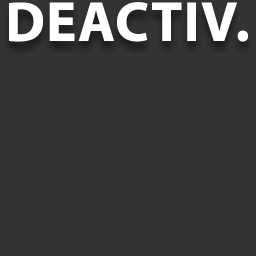
<style>
.page{position:relative;width:256px;height:256px;background:#333333}
.page>*{position:absolute;margin:0}
.t1{font:56.5px "MyriadPro-Bold";color:#ffffff;font-weight:bold}
</style>
<div class="page">
<p class="t1" style="left:9px;top:2px;width:239px;height:40px">DEACTIV.</p>
</div>
